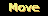
<style>
.page{position:relative;width:48px;height:16px;background:#000000}
.page>*{position:absolute;margin:0}
.t1{font:11px "Meiryo";color:#f0f080;font-weight:bold}
</style>
<div class="page">
<p class="t1" style="left:9px;top:3px;width:30px;height:8px">Move</p>
</div>
